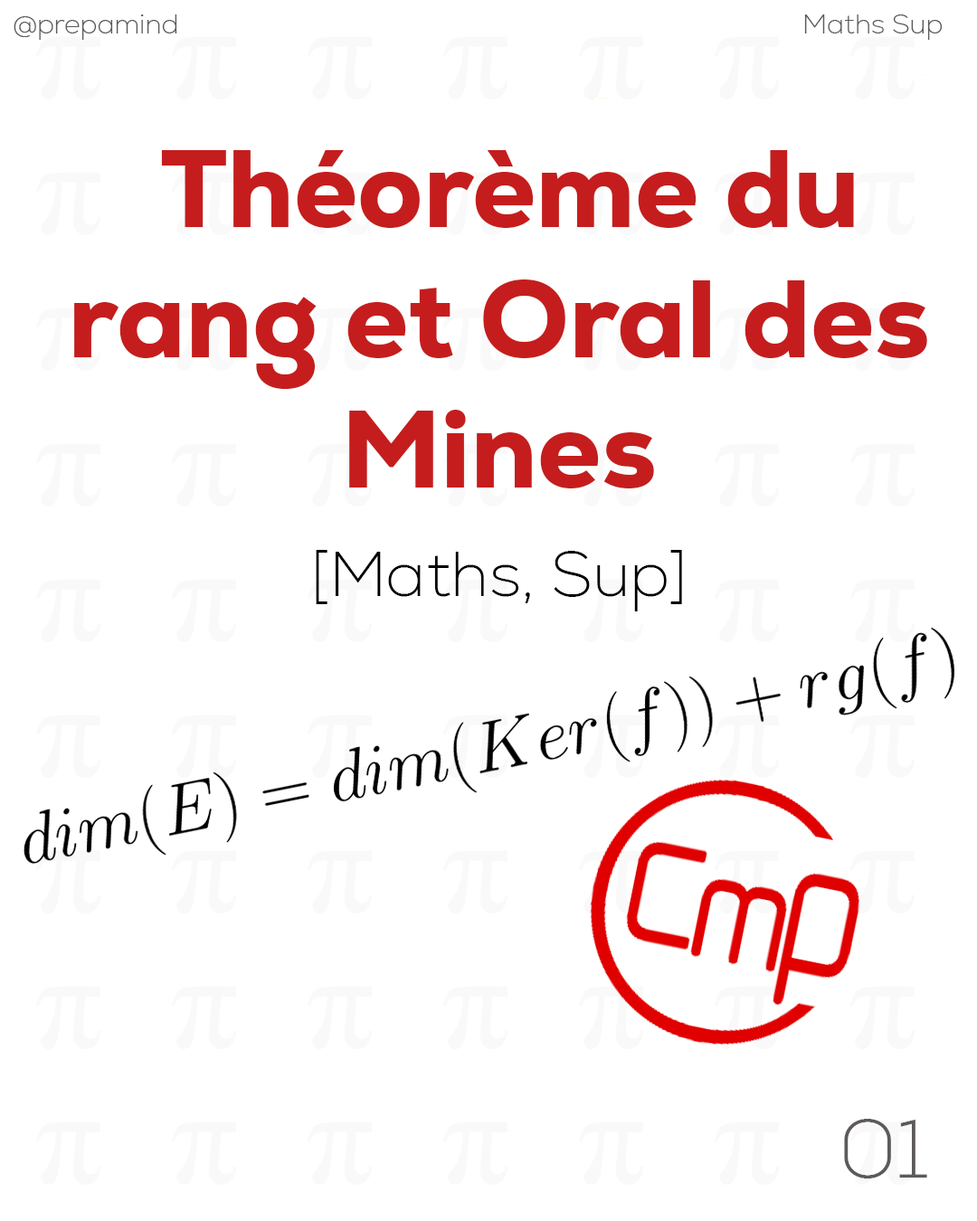
<style>
.page{position:relative;width:977px;height:1221px;background:#ffffff}
.page>*{position:absolute;margin:0}
.t1{font:27.1px "Nexa-ExtraLight";color:#5e5a5a}
.t2{font:108.5px "Nexa-Heavy";color:#c51d1d}
.t3{font:9px "Nexa-Heavy";color:#c51d1d}
.t4{font:63.3px "Nexa-ExtraLight";color:#000000}
.t5{font:81.7px "Nexa-ExtraLight";color:#5e5a5a}
</style>
<div class="page">
<p class="t1" style="left:14px;top:14px;width:163px;height:26px">@prepamind</p>
<p class="t1" style="left:804px;top:14px;width:138px;height:26px">Maths Sup</p>
<p class="t2" style="left:74px;top:150px;width:853px;height:461px;text-align:center">Théorème du rang et Oral des Mines<br><span class="t3"><br><br><br></span><span class="t4">[Maths, Sup]</span></p>
<p class="t5" style="left:844px;top:1119px;width:83px;height:59px">01</p>
</div>
